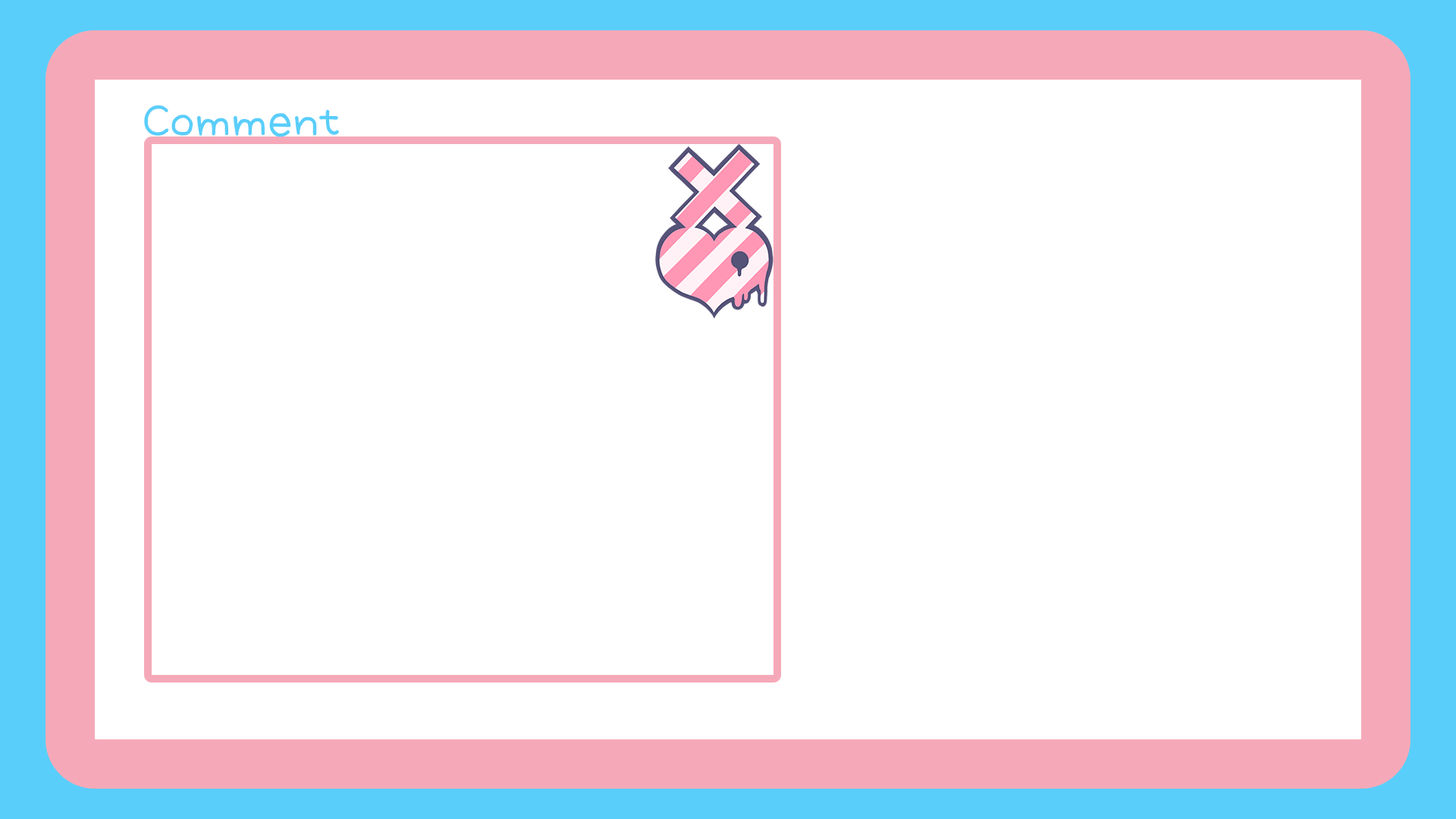
<style>
.page{position:relative;width:1456px;height:819px;background:#ffffff}
.page>*{position:absolute;margin:0}
.t1{font:44.2px "XiaolaiPSC";color:#5acefa}
</style>
<div class="page">
<p class="t1" style="left:144px;top:105px;width:195px;height:32px">Comment</p>
</div>
